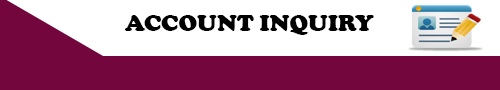
<style>
.page{position:relative;width:500px;height:90px;background:#73073d}
.page>*{position:absolute;margin:0}
.t1{font:24px "CooperBlack";color:#000000}
</style>
<div class="page">
<p class="t1" style="left:125px;top:15px;width:249px;height:20px">ACCOUNT INQUIRY</p>
</div>
